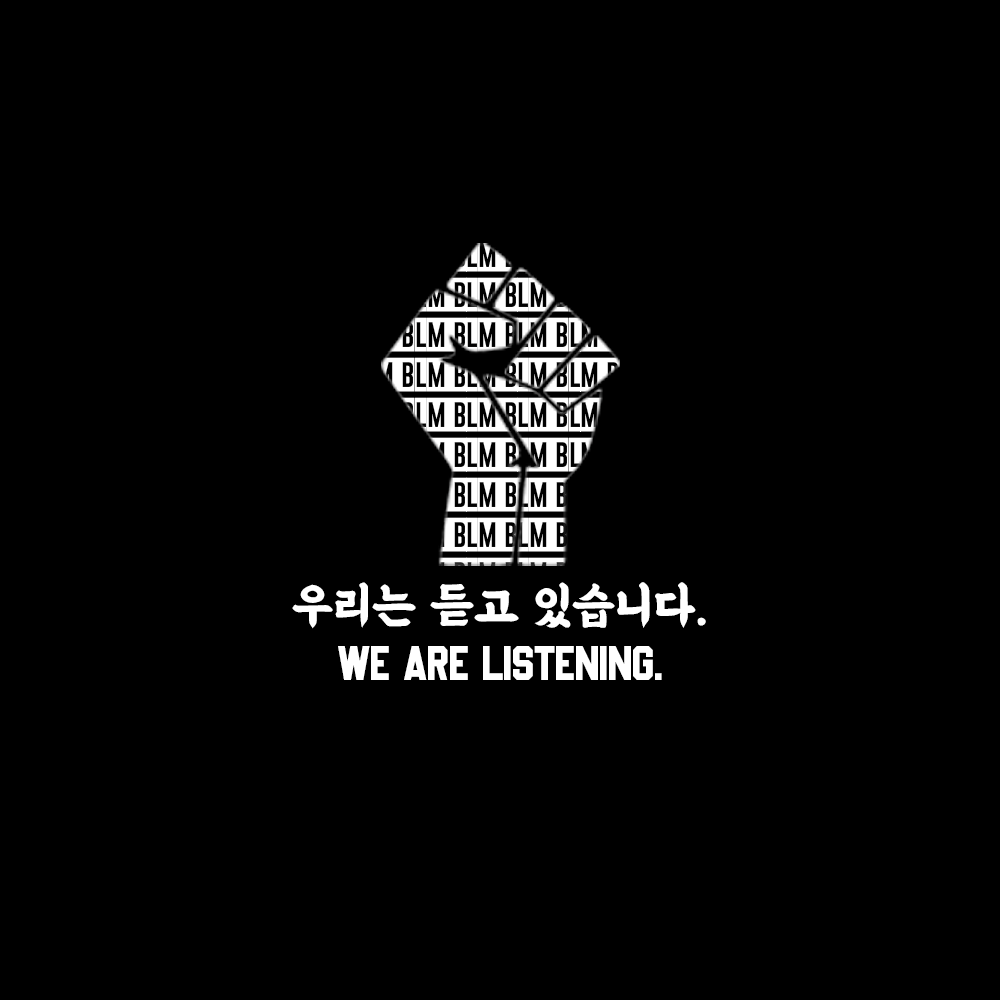
<style>
.page{position:relative;width:1000px;height:1000px;background:#000000}
.page>*{position:absolute;margin:0}
.t1{font:12px "Basketball";color:#ffffff}
.t2{font:12px "BMEULJIROTTF";color:#ffffff}
</style>
<div class="page">
<p class="t1" style="left:292px;top:582px;width:414px;height:98px;text-align:center"><span class="t2">우리는 듣고 있습니다.<br></span>we are listening.</p>
</div>
